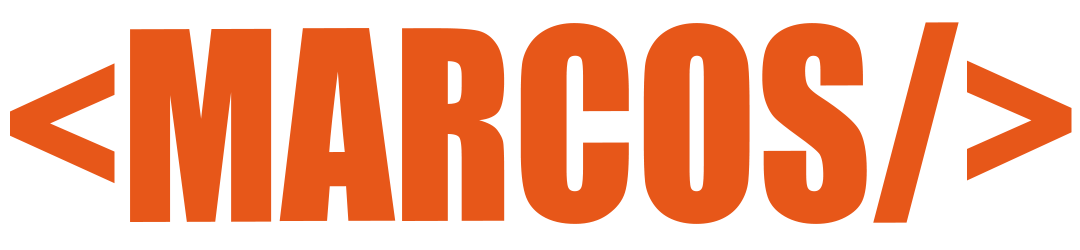
<style>
.page{position:relative;width:1080px;height:250px;background:#ffffff}
.page>*{position:absolute;margin:0}
.t1{font:243.8px "Impact";color:#e75719;text-transform:uppercase;scale:0.91 1}
</style>
<div class="page">
<p class="t1" style="left:10px;top:22px;width:1062px;height:202px">&lt;marcos/&gt;</p>
</div>
